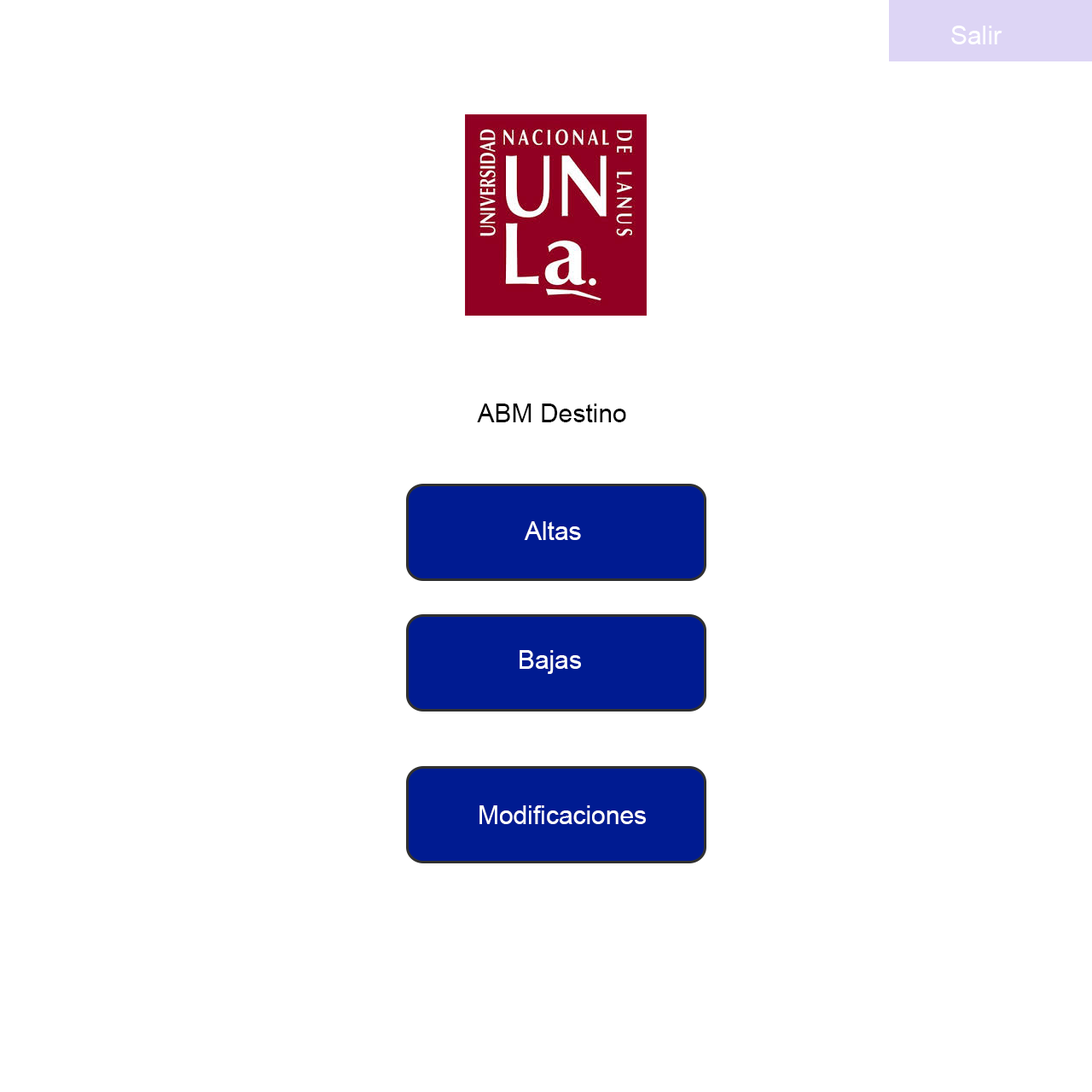
<style>
.page{position:relative;width:1092px;height:1092px;background:#ffffff}
.page>*{position:absolute;margin:0}
.t1{font:25.6px "ArialMT";color:#ffffff}
.t2{font:25.6px "ArialMT";color:#000000}
</style>
<div class="page">
<p class="t1" style="left:951px;top:26px;width:51px;height:18px">Salir</p>
<p class="t2" style="left:477px;top:404px;width:149px;height:18px">ABM Destino</p>
<p class="t1" style="left:524px;top:521px;width:57px;height:19px">Altas</p>
<p class="t1" style="left:520px;top:650px;width:61px;height:24px">Bajas</p>
<p class="t1" style="left:479px;top:805px;width:167px;height:19px">Modificaciones</p>
</div>
